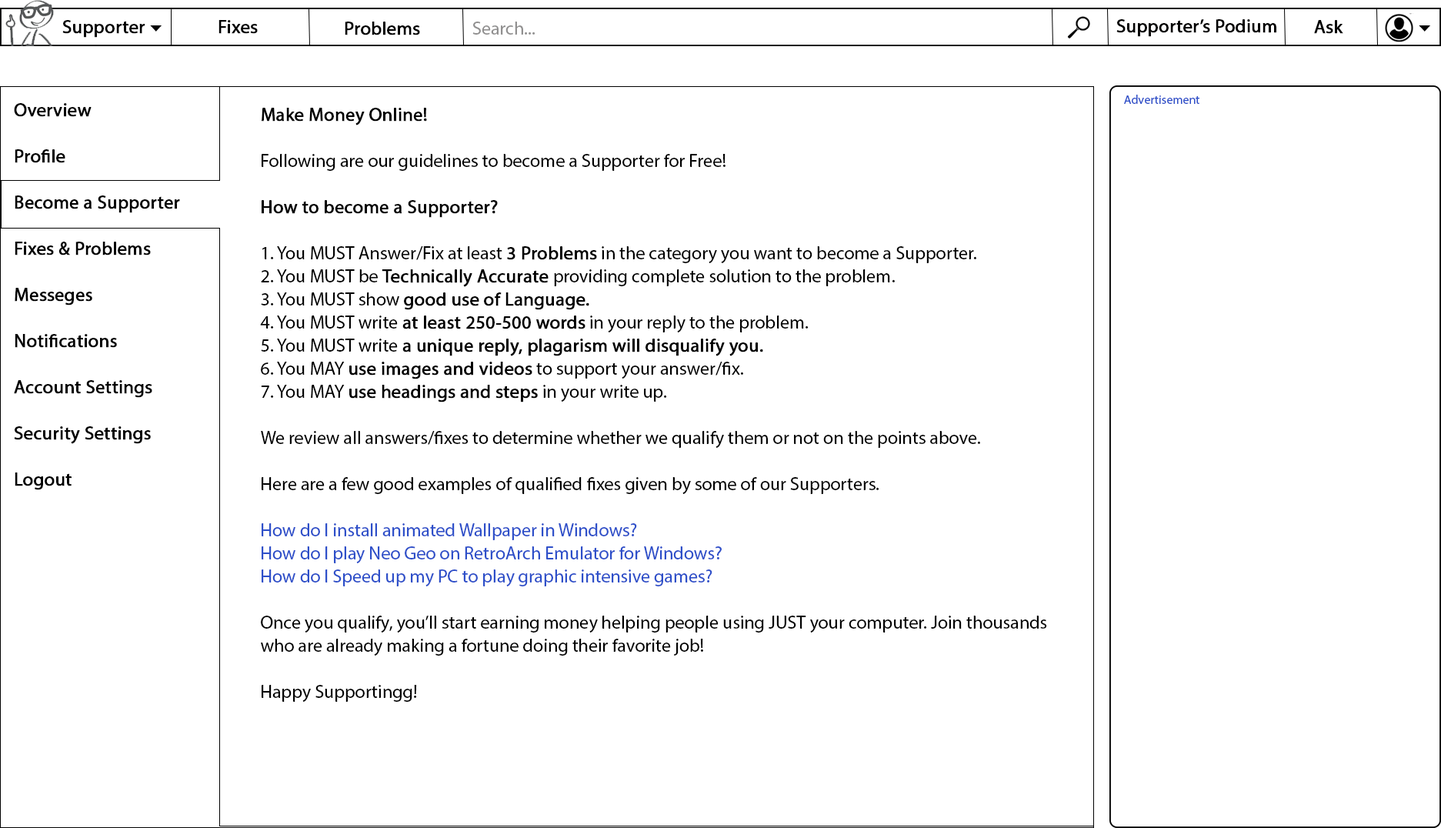
<style>
.page{position:relative;width:1441px;height:828px;background:#ffffff}
.page>*{position:absolute;margin:0}
.t1{font:18.5px "MyriadPro-Regular";color:#000000;font-weight:bold}
.t2{font:18.5px "MyriadPro-Regular";color:#919090}
.t3{font:18.5px "MyriadPro-Regular";color:#010000;font-weight:bold}
.t4{font:12.3px "MyriadPro-Regular";color:#2d4fc9}
.t5{font:18.5px/46.2px "MyriadPro-Regular";color:#000000;font-weight:bold}
.t6{font:18.5px/23.1px "MyriadPro-Regular";color:#000000}
.t7{font:18.5px/23.1px "MyriadPro-Regular";color:#000000;font-weight:bold}
.t8{font:18.5px/23.1px "MyriadPro-Regular";color:#2d4fc9}
</style>
<div class="page">
<p class="t1" style="left:62px;top:20px;width:83px;height:18px">Supporter</p>
<p class="t1" style="left:218px;top:20px;width:40px;height:14px">Fixes</p>
<p class="t1" style="left:345px;top:22px;width:75px;height:13px">Problems</p>
<p class="t2" style="left:472px;top:22px;width:63px;height:13px">Search...</p>
<p class="t3" style="left:1116px;top:19px;width:160px;height:18px">Supporter’s Podium</p>
<p class="t1" style="left:1314px;top:20px;width:29px;height:14px">Ask</p>
<p class="t4" style="left:1124px;top:95px;width:75px;height:9px">Advertisement</p>
<p class="t5" style="left:14px;top:103px;width:166px;height:387px">Overview<br>Profile<br>Become a Supporter<br>Fixes &amp; Problems<br>Messeges<br>Notifications<br>Account Settings<br>Security Settings<br>Logout</p>
<p class="t6" style="left:260px;top:108px;width:787px;height:594px"><span class="t7">Make Money Online!<br></span><br>Following are our guidelines to become a Supporter for Free!<br><br><span class="t7">How to become a Supporter?<br></span><br>1. You MUST Answer/Fix at least <span class="t7">3 Problems</span> in the category you want to become a Supporter.<br>2. You MUST be <span class="t7">Technically Accurate </span>providing complete solution to the problem.<br>3. You MUST show <span class="t7">good use of Language.<br></span>4. You MUST write<span class="t7"> at least 250-500 words</span> in your reply to the problem.<br>5. You MUST write<span class="t7"> a unique reply, plagarism will disqualify you.<br></span>6. You MAY <span class="t7">use images and videos</span> to support your answer/fix.<br>7. You MAY <span class="t7">use headings and steps</span> in your write up.<br><br>We review all answers/fixes to determine whether we qualify them or not on the points above.<br><br>Here are a few good examples of qualified fixes given by some of our Supporters.<br><br><span class="t8">How do I install animated Wallpaper in Windows?<br>How do I play Neo Geo on RetroArch Emulator for Windows?<br>How do I Speed up my PC to play graphic intensive games?<br><br></span>Once you qualify, you’ll start earning money helping people using JUST your computer. Join thousands<br>who are already making a fortune doing their favorite job!<br><br>Happy Supportingg!</p>
</div>
